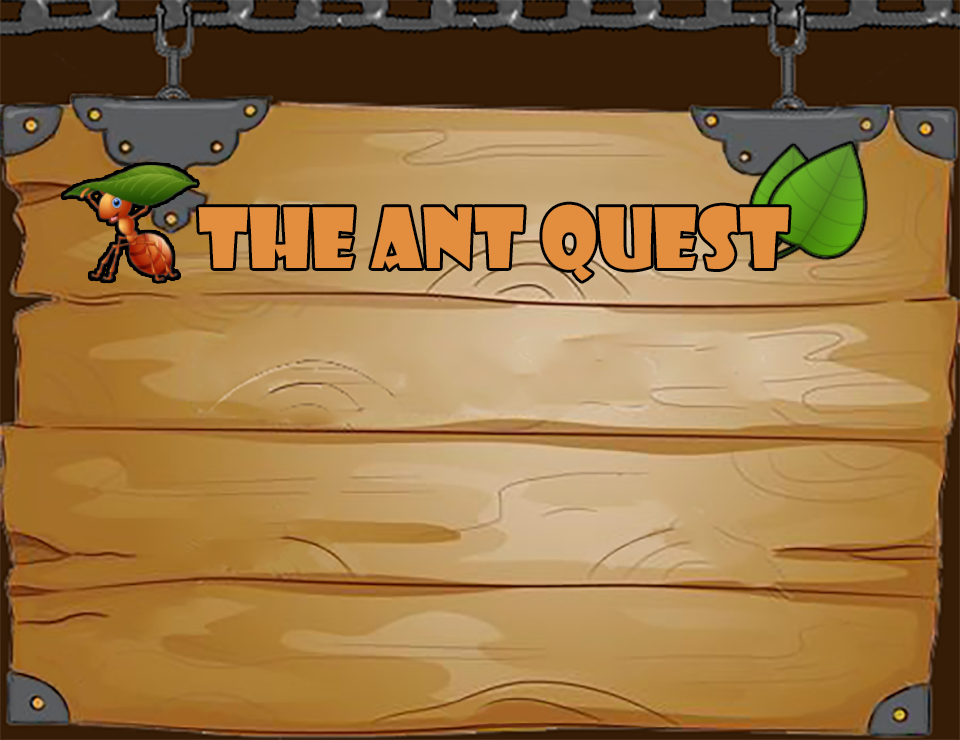
<style>
.page{position:relative;width:960px;height:740px}
.page>*{position:absolute;margin:0}
.t1{font:80.9px "ShowcardGothic-Reg";color:#e38d3e}
</style>
<div class="page">
<p class="t1" style="left:198px;top:204px;width:591px;height:77px">The ant quest</p>
</div>
